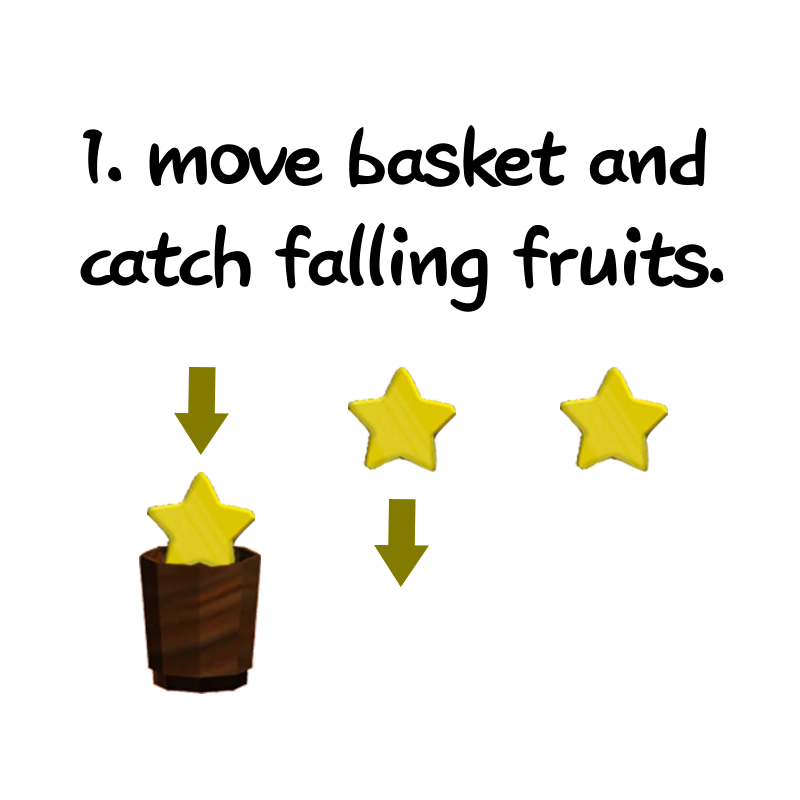
<style>
.page{position:relative;width:800px;height:800px;background:#ffffff}
.page>*{position:absolute;margin:0}
.t1{font:99.7px/100.7px "DXHgrmB-KSCpc-EUC-H";letter-spacing:-0.025em;color:#000000}
</style>
<div class="page">
<p class="t1" style="left:80px;top:125px;width:644px;height:187px">1. move basket and <br>catch falling fruits.</p>
</div>
